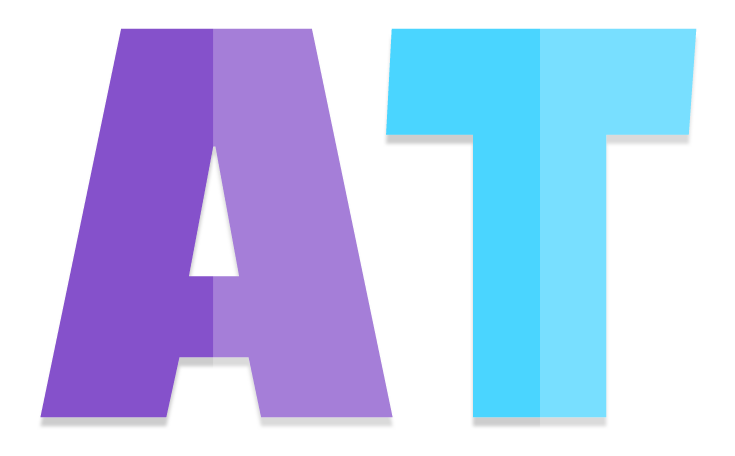
<style>
.page{position:relative;width:735px;height:456px;background:#ffffff}
.page>*{position:absolute;margin:0}
.t1{font:625px "PassionOne-Bold";color:#8651cb}
.t2{font:625px "PassionOne-Bold";color:#4ad5ff}
</style>
<div class="page">
<p class="t1" style="left:40px;top:28px;width:657px;height:390px">A<span class="t2">T</span></p>
</div>
